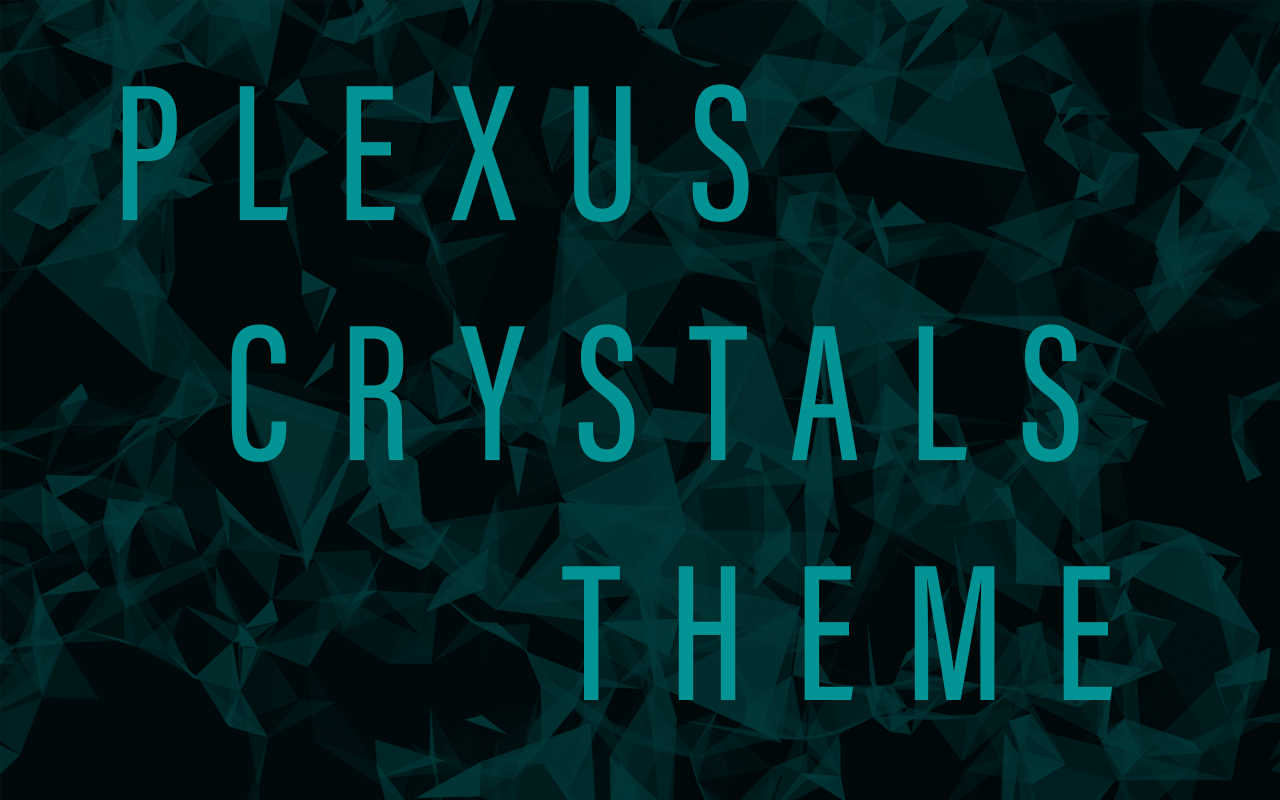
<style>
.page{position:relative;width:1280px;height:800px}
.page>*{position:absolute;margin:0}
.t1{font:200px "AcuminConcept-ExtraCondensedMedium";letter-spacing:0.25em;color:#029395}
</style>
<div class="page">
<p class="t1" style="left:122px;top:84px;width:991px;height:616px">PLEXUS<br>    CRYSTALS             THEME</p>
</div>
